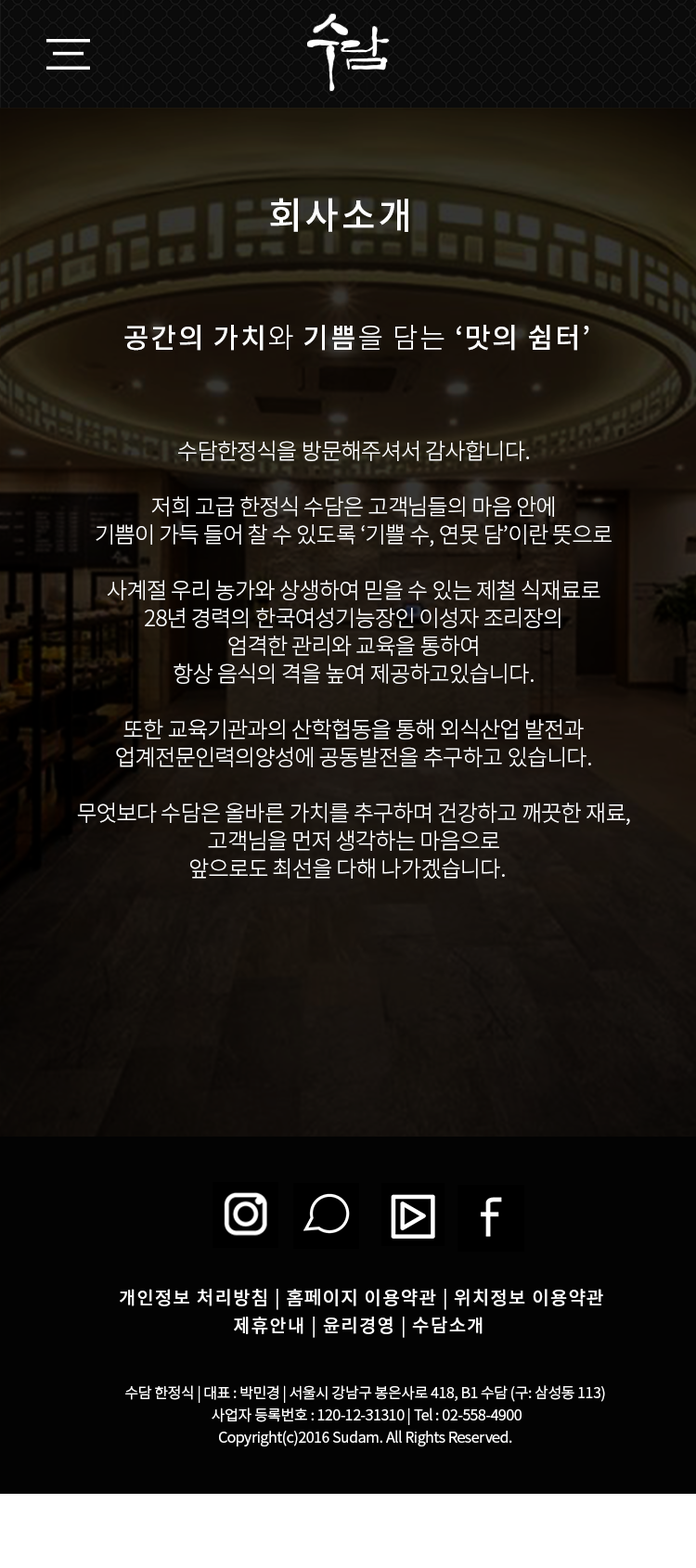
<style>
.page{position:relative;width:696px;height:1568px}
.page>*{position:absolute;margin:0}
.t1{font:37.1px "NotoSansCJKkr-Medium";letter-spacing:0.06em;color:#fefefe}
.t2{font:27.8px "NotoSansCJKkr-Medium";letter-spacing:0.06em;color:#fefefe}
.t3{font:27.8px "NotoSansCJKkr-Light";letter-spacing:0.06em;color:#fefefe}
.t4{font:22.3px/27.8px "NotoSansCJKkr-Light";letter-spacing:-0.025em;color:#fefefe}
.t5{font:18.6px/27.8px "NotoSansCJKkr-Medium";letter-spacing:0.06em;color:#ffffff}
.t6{font:14.8px/22.3px "NotoSansCJKkr-DemiLight";letter-spacing:-0.025em;color:#ffffff}
</style>
<div class="page">
<p class="t1" style="left:270px;top:198px;width:138px;height:34px">회사소개</p>
<p class="t2" style="left:124px;top:325px;width:465px;height:26px">공간의 가치<span class="t3">와 </span>기쁨<span class="t3">을 담는 </span>‘맛의 쉼터’</p>
<p class="t4" style="left:77px;top:440px;width:553px;height:439px;text-align:center">수담한정식을 방문해주셔서 감사합니다.<br><br>저희 고급 한정식 수담은 고객님들의 마음 안에<br>기쁨이 가득 들어 찰 수 있도록 ‘기쁠 수, 연못 담’이란 뜻으로<br><br>사계절 우리 농가와 상생하여 믿을 수 있는 제철 식재료로<br>28년 경력의 한국여성기능장인 이성자 조리장의<br>엄격한 관리와 교육을 통하여<br>항상 음식의 격을 높여 제공하고있습니다.<br><br>또한 교육기관과의 산학협동을 통해 외식산업 발전과<br>업계전문인력의양성에 공동발전을 추구하고 있습니다.<br><br>무엇보다 수담은 올바른 가치를 추구하며 건강하고 깨끗한 재료,<br>고객님을 먼저 생각하는 마음으로<br>앞으로도 최선을 다해 나가겠습니다.</p>
<p class="t5" style="left:120px;top:1289px;width:483px;height:49px;text-align:center">개인정보 처리방침 | 홈페이지 이용약관 | 위치정보 이용약관<br>제휴안내 | 윤리경영 | 수담소개</p>
<p class="t6" style="left:125px;top:1385px;width:480px;height:61px;text-align:center">수담 한정식 | 대표 : 박민경 | 서울시 강남구 봉은사로 418, B1 수담 (구: 삼성동 113) <br>사업자 등록번호 : 120-12-31310 | Tel : 02-558-4900<br>Copyright(c)2016 Sudam. All Rights Reserved.</p>
</div>
